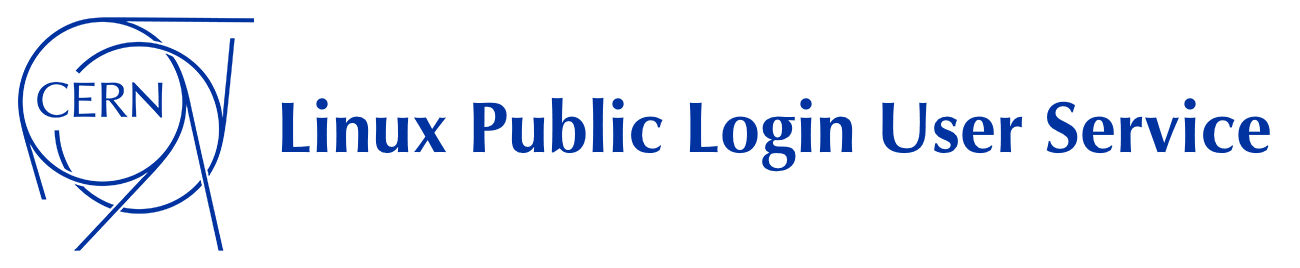
<style>
.page{position:relative;width:1300px;height:268px;background:#ffffff}
.page>*{position:absolute;margin:0}
.t1{font:72px "Optima-Bold";color:#0033a0}
</style>
<div class="page">
<p class="t1" style="left:281px;top:97px;width:989px;height:75px">Linux Public Login User Service</p>
</div>
